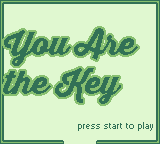
<style>
.page{position:relative;width:160px;height:144px;background:#e0f8d0}
.page>*{position:absolute;margin:0}
.t1{font:32px "ThirstyScriptExtraboldDemo";color:#327156}
.t2{font:8px "PixelSix01";color:#327156}
</style>
<div class="page">
<p class="t1" style="left:3px;top:28px;width:135px;height:76px">You Are<br>the Key</p>
<p class="t2" style="left:78px;top:122px;width:75px;height:9px">Press Start to Play</p>
</div>
